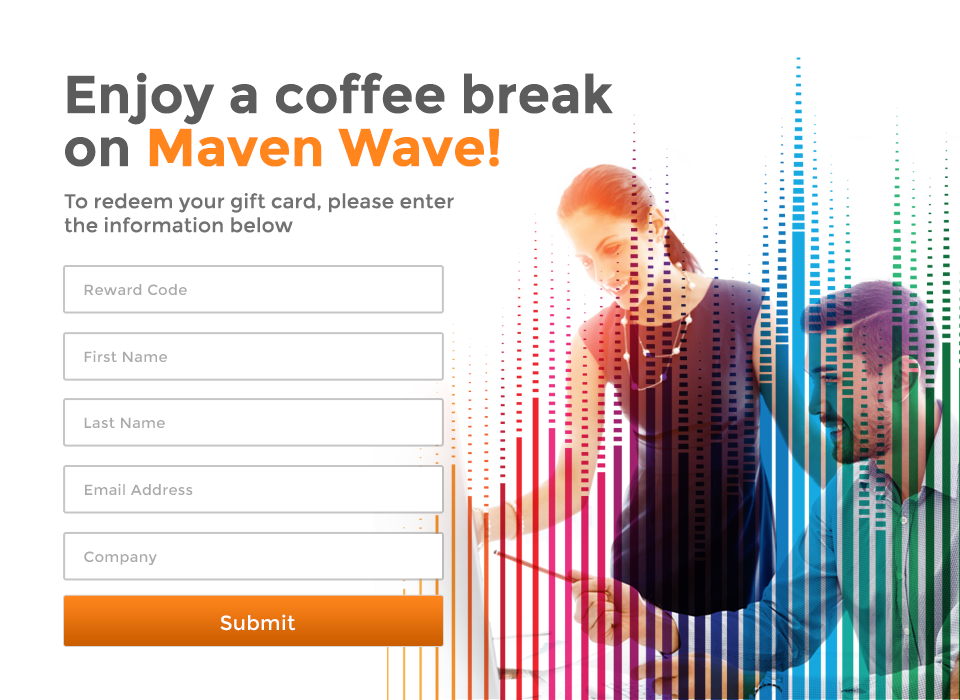
<style>
.page{position:relative;width:960px;height:700px;background:#ffffff}
.page>*{position:absolute;margin:0}
.t1{font:53px/53px "Montserrat-Bold";color:#5c5c5c}
.t2{font:53px/53px "Montserrat-Bold";color:#ff851c}
.t3{font:20px "Montserrat-Regular";color:#727272}
.t4{font:14.7px "Montserrat-Regular";letter-spacing:0.02em;color:#aaaaaa}
.t5{font:20.2px "Montserrat-Regular";letter-spacing:0.02em;color:#ffffff}
</style>
<div class="page">
<p class="t1" style="left:65px;top:72px;width:548px;height:95px">Enjoy a coffee break <br>on <span class="t2">Maven Wave!</span></p>
<p class="t3" style="left:64px;top:193px;width:390px;height:40px">To redeem your gift card, please enter the information below</p>
<p class="t4" style="left:84px;top:284px;width:103px;height:11px">Reward Code</p>
<p class="t4" style="left:84px;top:350px;width:83px;height:12px">First Name</p>
<p class="t4" style="left:84px;top:417px;width:81px;height:11px">Last Name</p>
<p class="t4" style="left:85px;top:483px;width:108px;height:12px">Email Address</p>
<p class="t4" style="left:84px;top:551px;width:73px;height:15px">Company</p>
<p class="t5" style="left:220px;top:614px;width:76px;height:17px">Submit</p>
</div>
